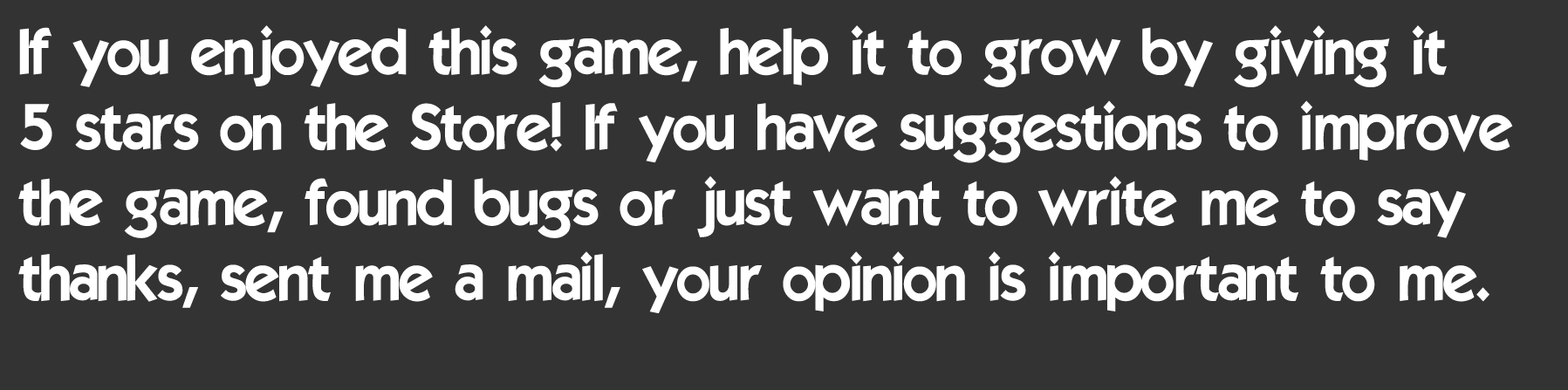
<style>
.page{position:relative;width:1568px;height:390px;background:#333333}
.page>*{position:absolute;margin:0}
.t1{font:62.8px "ELEGANCE";color:#ffffff}
</style>
<div class="page">
<p class="t1" style="left:18px;top:25px;width:1495px;height:288px">If you enjoyed this game, help it to grow by giving it<br>5 stars on the Store! If you have suggestions to improve<br>the game, found bugs or just want to write me to say<br>thanks, sent me a mail, your opinion is important to me.</p>
</div>
